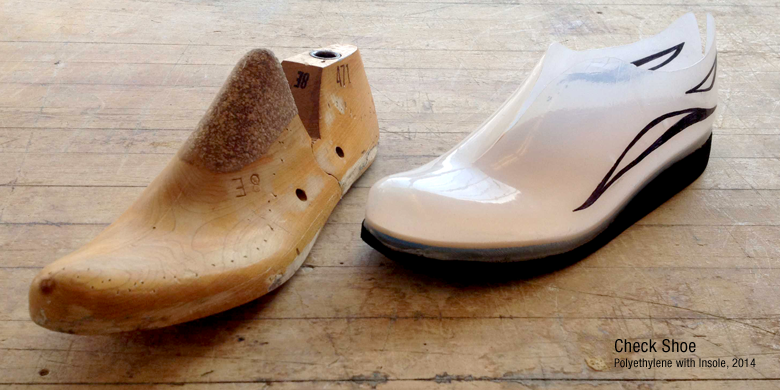
<style>
.page{position:relative;width:780px;height:390px}
.page>*{position:absolute;margin:0}
.t1{font:12px/15px "HelveticaNeue-Condensed";letter-spacing:0.02em;color:#000000}
.t2{font:18px/14px "HelveticaNeue-Condensed";letter-spacing:0.02em;color:#000000}
</style>
<div class="page">
<p class="t1" style="left:614px;top:339px;width:142px;height:30px"><span class="t2">Check Shoe<br></span>Polyethylene with Insole, 2014</p>
</div>
